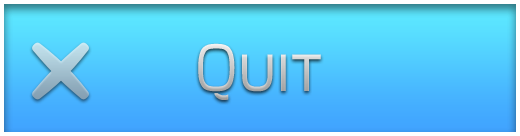
<style>
.page{position:relative;width:520px;height:136px}
.page>*{position:absolute;margin:0}
.t1{font:64px "Exo-Regular";font-variant:small-caps}
</style>
<div class="page">
<p class="t1" style="left:198px;top:43px;width:123px;height:57px">Quit</p>
</div>
